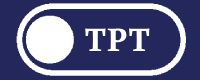
<style>
.page{position:relative;width:200px;height:80px;background:#23275c}
.page>*{position:absolute;margin:0}
.t1{font:34px "Alkalami-Regular";color:#ffffff}
</style>
<div class="page">
<p class="t1" style="left:85px;top:28px;width:65px;height:23px">TPT</p>
</div>
